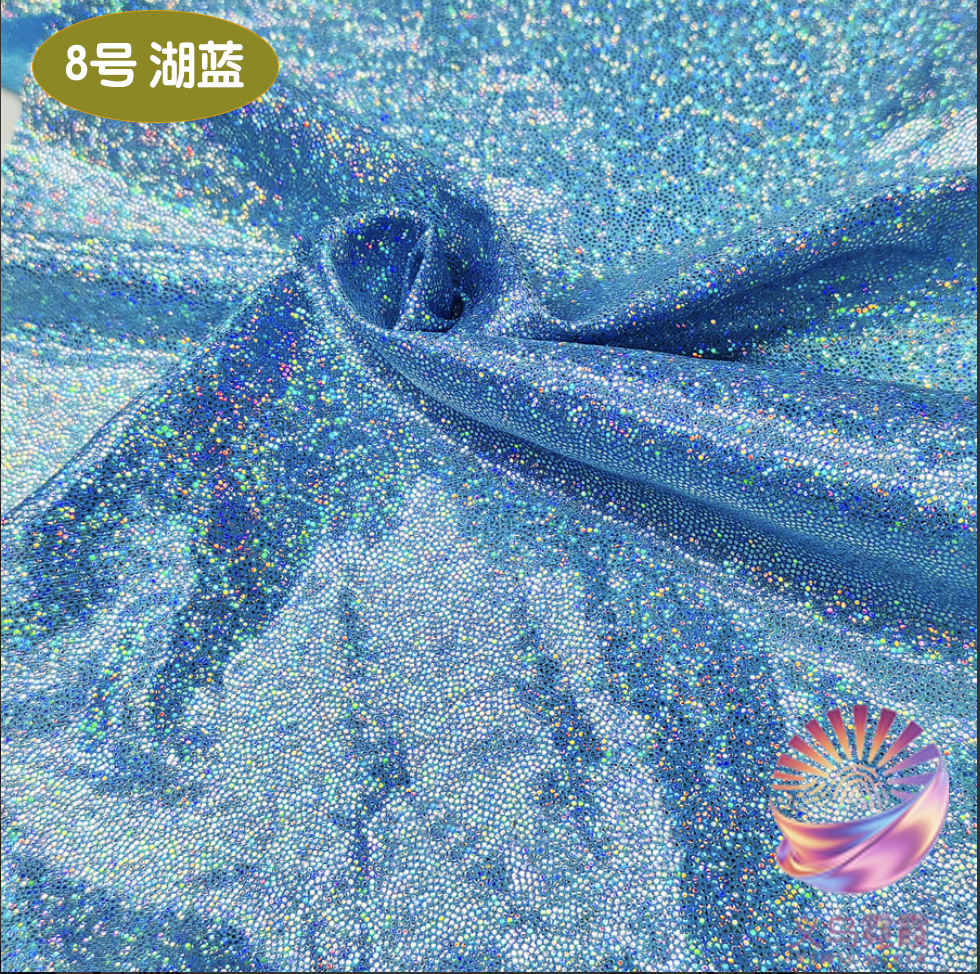
<style>
.page{position:relative;width:980px;height:974px}
.page>*{position:absolute;margin:0}
.t1{font:49.1px "STYuanti-SC-Bold";color:#ffffff;scale:0.97 1}
.t2{font:84.6px "STBaoliSC-Regular";color:#ffffff;scale:0.97 1}
</style>
<div class="page">
<p class="t1" style="left:66px;top:40px;width:178px;height:49px"><span class="t2">         </span>8号 湖蓝</p>
</div>
